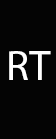
<style>
.page{position:relative;width:56px;height:139px;background:#040404}
.page>*{position:absolute;margin:0}
.t1{font:12px "MyriadPro-Regular";color:#ffffff}
</style>
<div class="page">
<p class="t1" style="left:9px;top:51px;width:42px;height:29px">RT</p>
</div>
